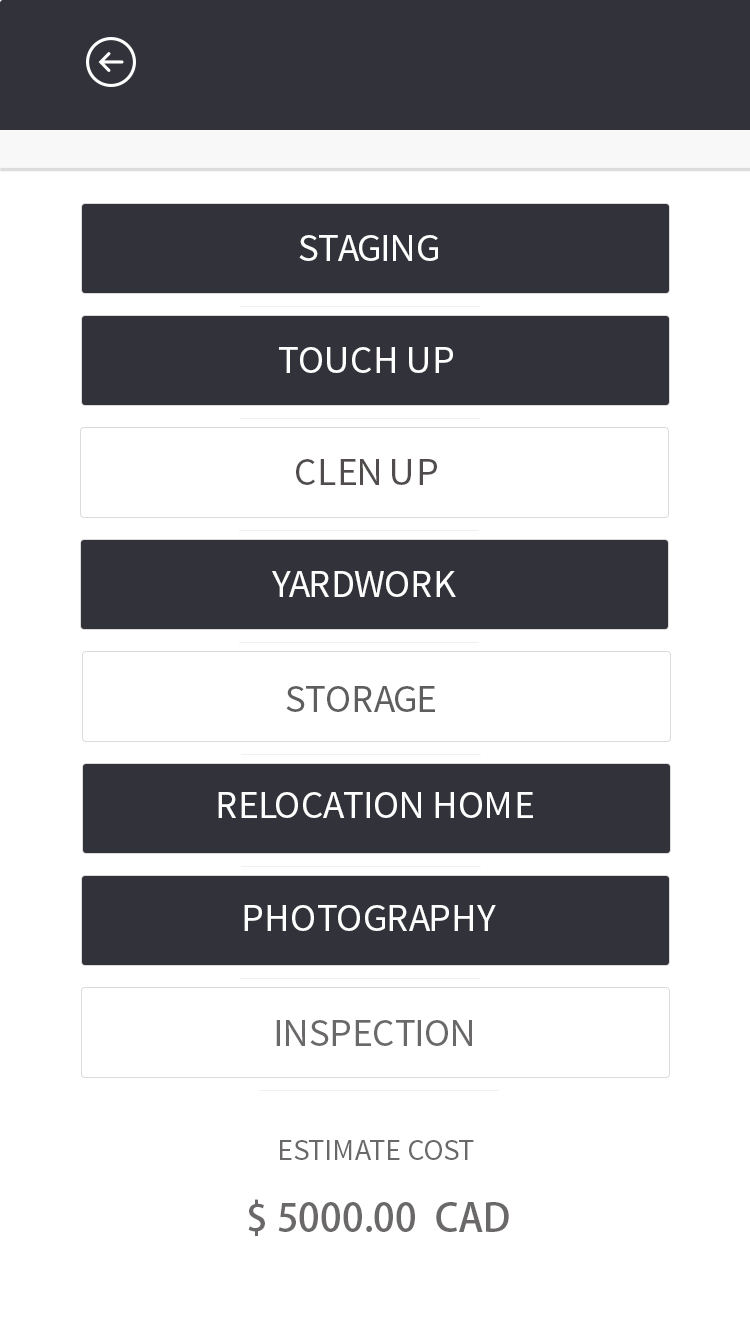
<style>
.page{position:relative;width:750px;height:1334px;background:#ffffff}
.page>*{position:absolute;margin:0}
.t1{font:39.4px "SourceSansPro-Regular";color:#fffefe}
.t2{font:39.4px "SourceSansPro-Regular";color:#524d4d}
.t3{font:39.4px "SourceSansPro-Regular";color:#5e5e5e}
.t4{font:39.4px "SourceSansPro-Regular";color:#6a6868}
.t5{font:30px "SourceSansPro-Regular";color:#6a6868}
.t6{font:38.5px "AdobeHeitiStd-Regular";color:#6a6868}
</style>
<div class="page">
<p class="t1" style="left:299px;top:235px;width:139px;height:26px">STAGING</p>
<p class="t1" style="left:279px;top:347px;width:174px;height:26px">TOUCH UP</p>
<p class="t2" style="left:296px;top:459px;width:141px;height:26px">CLEN UP</p>
<p class="t1" style="left:272px;top:571px;width:184px;height:26px">YARDWORK</p>
<p class="t3" style="left:286px;top:686px;width:149px;height:26px">STORAGE</p>
<p class="t1" style="left:218px;top:792px;width:315px;height:26px">RELOCATION HOME</p>
<p class="t1" style="left:244px;top:905px;width:252px;height:26px">PHOTOGRAPHY</p>
<p class="t4" style="left:276px;top:1020px;width:196px;height:26px">INSPECTION</p>
<p class="t5" style="left:280px;top:1140px;width:194px;height:20px">ESTIMATE COST</p>
<p class="t6" style="left:248px;top:1199px;width:261px;height:37px">$ 5000.00  CAD</p>
</div>
